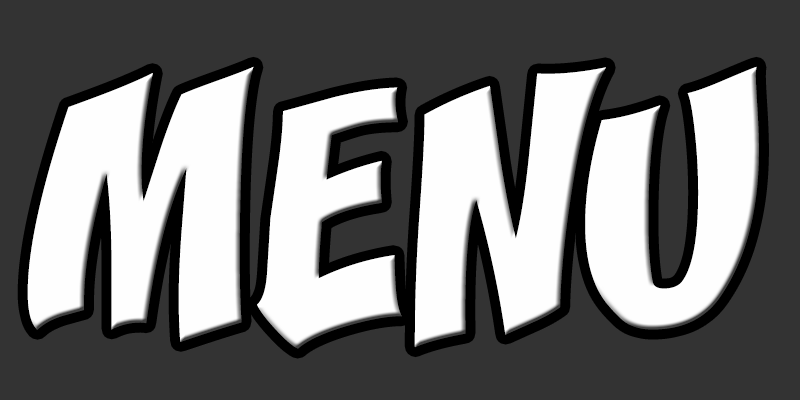
<style>
.page{position:relative;width:800px;height:400px;background:#333333}
.page>*{position:absolute;margin:0}
.t1{font:320px "Yikes";color:#fefefe}
</style>
<div class="page">
<p class="t1" style="left:27px;top:66px;width:732px;height:283px">MENU</p>
</div>
